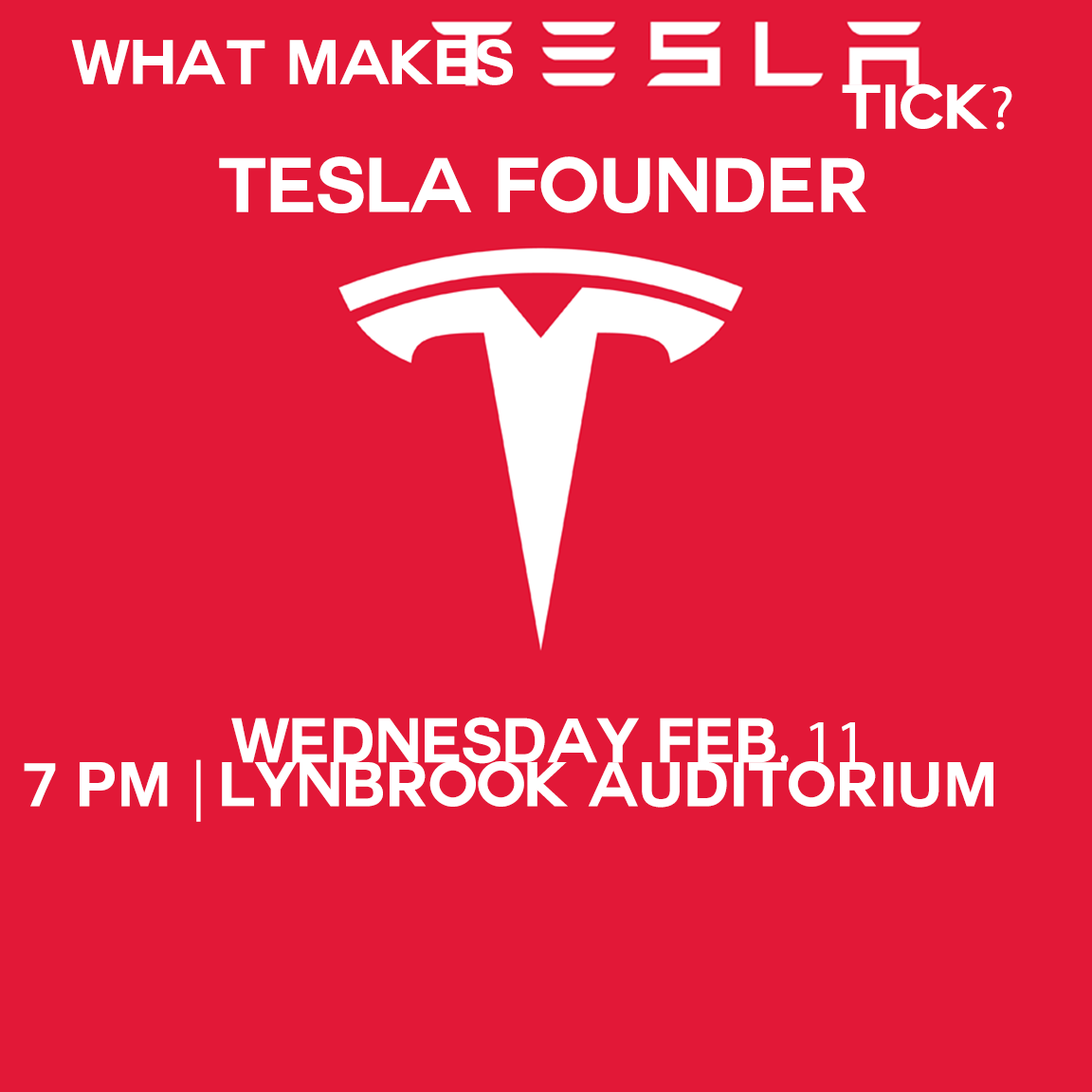
<style>
.page{position:relative;width:1092px;height:1092px;background:#e21837}
.page>*{position:absolute;margin:0}
.t1{font:61.6px "COUTURE-Bold";color:#ffffff}
.t2{font:61.6px "MyriadPro-Regular";color:#ffffff}
</style>
<div class="page">
<p class="t1" style="left:71px;top:39px;width:442px;height:46px">What makes</p>
<p class="t1" style="left:842px;top:83px;width:170px;height:47px">tick<span class="t2">?</span></p>
<p class="t1" style="left:231px;top:717px;width:624px;height:47px">wednesday feb<span class="t2">. 11</span></p>
<p class="t1" style="left:24px;top:759px;width:969px;height:63px">7 PM <span class="t2">| </span>Lynbrook Auditorium</p>
</div>
